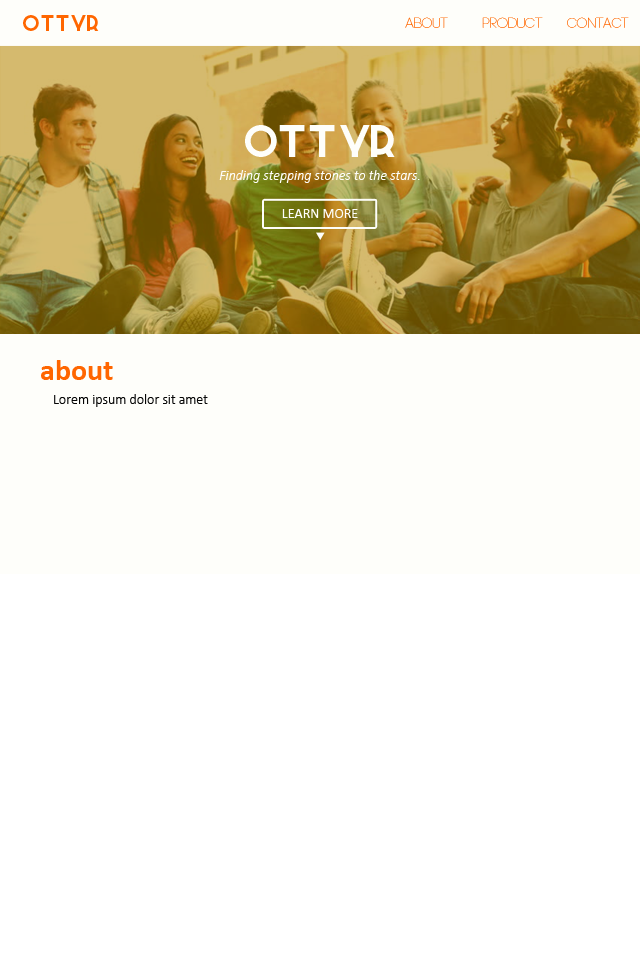
<style>
.page{position:relative;width:640px;height:960px;background:#ffffff}
.page>*{position:absolute;margin:0}
.t1{font:30px "Azedo-Bold";color:#ff6600}
.t2{font:14px "Code-Light";color:#ff6600}
.t3{font:60px "Azedo-Bold";color:#fefefa}
.t4{font:14px "Calibri-LightItalic";color:#fefefa}
.t5{font:14px "Calibri";color:#fefefa}
.t6{font:30px "Calibri-Bold";color:#ff6600}
.t7{font:14px "Calibri-Light";color:#050505}
</style>
<div class="page">
<p class="t1" style="left:23px;top:15px;width:76px;height:16px">Ottyr</p>
<p class="t2" style="left:405px;top:17px;width:224px;height:11px">ABOUT       PRODUCT     CONTACT</p>
<p class="t3" style="left:245px;top:125px;width:150px;height:32px">Ottyr</p>
<p class="t4" style="left:219px;top:170px;width:201px;height:13px">Finding stepping stones to the stars.</p>
<p class="t5" style="left:282px;top:209px;width:76px;height:9px">LEARN MORE</p>
<p class="t6" style="left:41px;top:360px;width:72px;height:20px">about</p>
<p class="t7" style="left:54px;top:394px;width:154px;height:13px">Lorem ipsum dolor sit amet</p>
</div>
